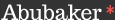
<style>
.page{position:relative;width:115px;height:20px;background:#333333}
.page>*{position:absolute;margin:0}
.t1{font:21px "Trocchi";color:#ffffff}
</style>
<div class="page">
<p class="t1" style="left:1px;top:4px;width:101px;height:17px">Abubaker</p>
</div>
